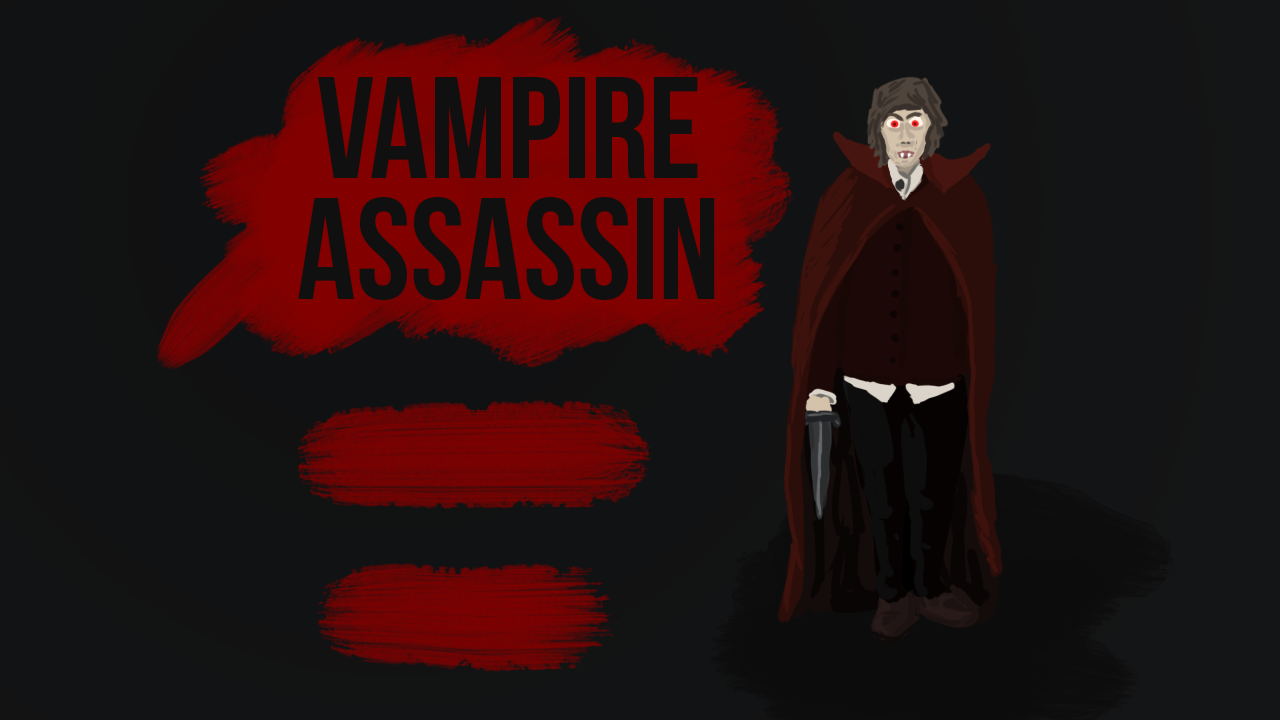
<style>
.page{position:relative;width:1280px;height:720px}
.page>*{position:absolute;margin:0}
.t1{font:144.6px "BebasNeueBold";color:#101010}
</style>
<div class="page">
<p class="t1" style="left:318px;top:76px;width:380px;height:102px">VAMPIRE</p>
<p class="t1" style="left:298px;top:196px;width:417px;height:104px">Assassin</p>
</div>
